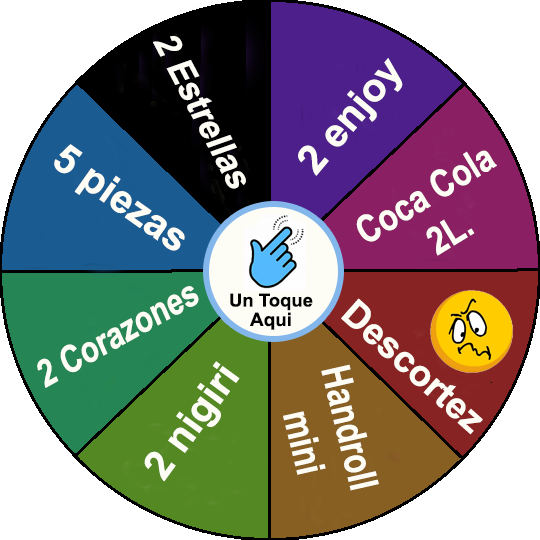
<style>
.page{position:relative;width:540px;height:540px;background:#ffffff}
.page>*{position:absolute;margin:0}
.t1{font:35.5px "Arial-BoldMT";color:#fdfdf6;scale:0.95 1}
.t2{font:40px "Arial-BoldMT";color:#fdfdf6}
.t3{font:38.2px "Arial-BoldMT";color:#fdfdf6;scale:0.83 1}
.t4{font:37.2px "Arial-BoldMT";color:#fdfdf6;scale:0.81 1}
.t5{font:18.1px "Arial-BoldMT";color:#040404}
.t6{font:36.8px "Arial-BoldMT";color:#fdfdf6}
.t7{font:18.6px "Arial-BoldMT";color:#010101}
.t8{font:40px "Arial-BoldMT";color:#fdfdf6;scale:0.78 1}
</style>
<div class="page">
<p class="t1" style="left:153px;top:36px;width:93px;height:153px;rotate:62deg">2 Estrellas</p>
<p class="t2" style="left:298px;top:58px;width:105px;height:118px;rotate:-50deg">2 enjoy</p>
<p class="t2" style="left:54px;top:144px;width:131px;height:107px;rotate:35deg">5 piezas</p>
<p class="t3" style="left:356px;top:150px;width:141px;height:106px;text-align:center;rotate:-31deg">Coca Cola<br>2L.</p>
<p class="t4" style="left:37px;top:286px;width:162px;height:102px;rotate:-29deg">2 Corazones</p>
<p class="t5" style="left:230px;top:293px;width:83px;height:18px">Un Toque</p>
<p class="t6" style="left:341px;top:298px;width:142px;height:137px;rotate:42deg">Descortez</p>
<p class="t7" style="left:250px;top:312px;width:41px;height:18px">Aqui</p>
<p class="t2" style="left:144px;top:361px;width:96px;height:121px;rotate:-54deg">2 nigiri</p>
<p class="t8" style="left:283px;top:364px;width:96px;height:127px;text-align:center;rotate:76deg">Handroll<br> mini</p>
</div>
